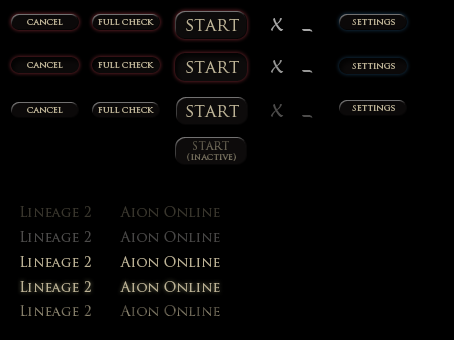
<style>
.page{position:relative;width:454px;height:340px;background:#000000}
.page>*{position:absolute;margin:0}
.t1{font:9px "TrajanPro-Regular";color:#bdb396}
.t2{font:16px "TrajanPro-Regular";color:#bdb396}
.t3{font:18px "LucidaHandwriting-Italic";color:#a8a8a8}
.t4{font:24px "LucidaHandwriting-Italic";color:#a7a7a7}
.t5{font:18px "LucidaHandwriting-Italic";color:#969695}
.t6{font:24px "LucidaHandwriting-Italic";color:#969695}
.t7{font:18px "LucidaHandwriting-Italic";color:#4d4c4b}
.t8{font:24px "LucidaHandwriting-Italic";color:#4d4c4b}
.t9{font:11px "TrajanPro-Regular";color:#5d584a}
.t10{font:9px "TrajanPro-Regular";color:#6f6958}
.t11{font:14px "TrajanPro-Regular";color:#39362d}
.t12{font:14px "TrajanPro-Regular";color:#4d4c4b}
.t13{font:14px "TrajanPro-Regular";color:#484746}
.t14{font:14px "TrajanPro-Regular";color:#bdb396}
.t15{font:14px "TrajanPro-Regular";color:#847d69}
.t16{font:14px "TrajanPro-Regular"}
</style>
<div class="page">
<p class="t1" style="left:27px;top:19px;width:36px;height:6px">cancel</p>
<p class="t1" style="left:98px;top:19px;width:56px;height:6px">full check</p>
<p class="t2" style="left:186px;top:18px;width:53px;height:13px">START</p>
<p class="t3" style="left:271px;top:18px;width:13px;height:13px">X</p>
<p class="t4" style="left:302px;top:29px;width:11px;height:3px">_</p>
<p class="t1" style="left:352px;top:19px;width:43px;height:6px">settings</p>
<p class="t1" style="left:27px;top:62px;width:36px;height:6px">cancel</p>
<p class="t1" style="left:98px;top:62px;width:56px;height:6px">full check</p>
<p class="t2" style="left:186px;top:60px;width:53px;height:13px">START</p>
<p class="t5" style="left:271px;top:60px;width:13px;height:13px">X</p>
<p class="t1" style="left:352px;top:63px;width:43px;height:6px">settings</p>
<p class="t6" style="left:302px;top:70px;width:11px;height:3px">_</p>
<p class="t1" style="left:27px;top:107px;width:36px;height:6px">cancel</p>
<p class="t1" style="left:98px;top:107px;width:56px;height:6px">full check</p>
<p class="t2" style="left:186px;top:104px;width:53px;height:13px">START</p>
<p class="t7" style="left:271px;top:104px;width:13px;height:13px">X</p>
<p class="t1" style="left:352px;top:105px;width:43px;height:6px">settings</p>
<p class="t8" style="left:302px;top:115px;width:11px;height:3px">_</p>
<p class="t9" style="left:193px;top:141px;width:36px;height:9px">START</p>
<p class="t10" style="left:187px;top:153px;width:49px;height:8px">(inactive)</p>
<p class="t11" style="left:20px;top:206px;width:71px;height:11px">Lineage 2</p>
<p class="t11" style="left:120px;top:206px;width:100px;height:11px">Aion Online</p>
<p class="t12" style="left:20px;top:231px;width:71px;height:11px">Lineage 2</p>
<p class="t13" style="left:120px;top:231px;width:100px;height:11px">Aion Online</p>
<p class="t14" style="left:20px;top:256px;width:71px;height:11px">Lineage 2</p>
<p class="t14" style="left:120px;top:256px;width:100px;height:11px">Aion Online</p>
<p class="t14" style="left:20px;top:281px;width:71px;height:11px">Lineage 2</p>
<p class="t14" style="left:120px;top:281px;width:100px;height:11px">Aion Online</p>
<p class="t15" style="left:20px;top:305px;width:71px;height:11px">Lineage 2</p>
<p class="t16" style="left:120px;top:305px;width:100px;height:11px">Aion Online</p>
</div>
